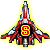
<style>
.page{position:relative;width:50px;height:50px;background:#ffffff}
.page>*{position:absolute;margin:0}
.t1{font:12px "ArialMT";color:#ff0000;font-weight:bold}
</style>
<div class="page">
<p class="t1" style="left:22px;top:26px;width:7px;height:9px">S</p>
</div>
